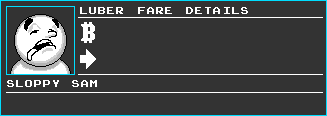
<style>
.page{position:relative;width:327px;height:116px;background:#333333}
.page>*{position:absolute;margin:0}
.t1{font:11px "AtariRaster";letter-spacing:0.1em;color:#ffffff}
.t2{font:10px "AtariRaster";letter-spacing:0.1em;color:#ffffff}
</style>
<div class="page">
<p class="t1" style="left:80px;top:7px;width:168px;height:7px">Luber FARE Details</p>
<p class="t2" style="left:7px;top:80px;width:90px;height:7px">Sloppy sam</p>
</div>
